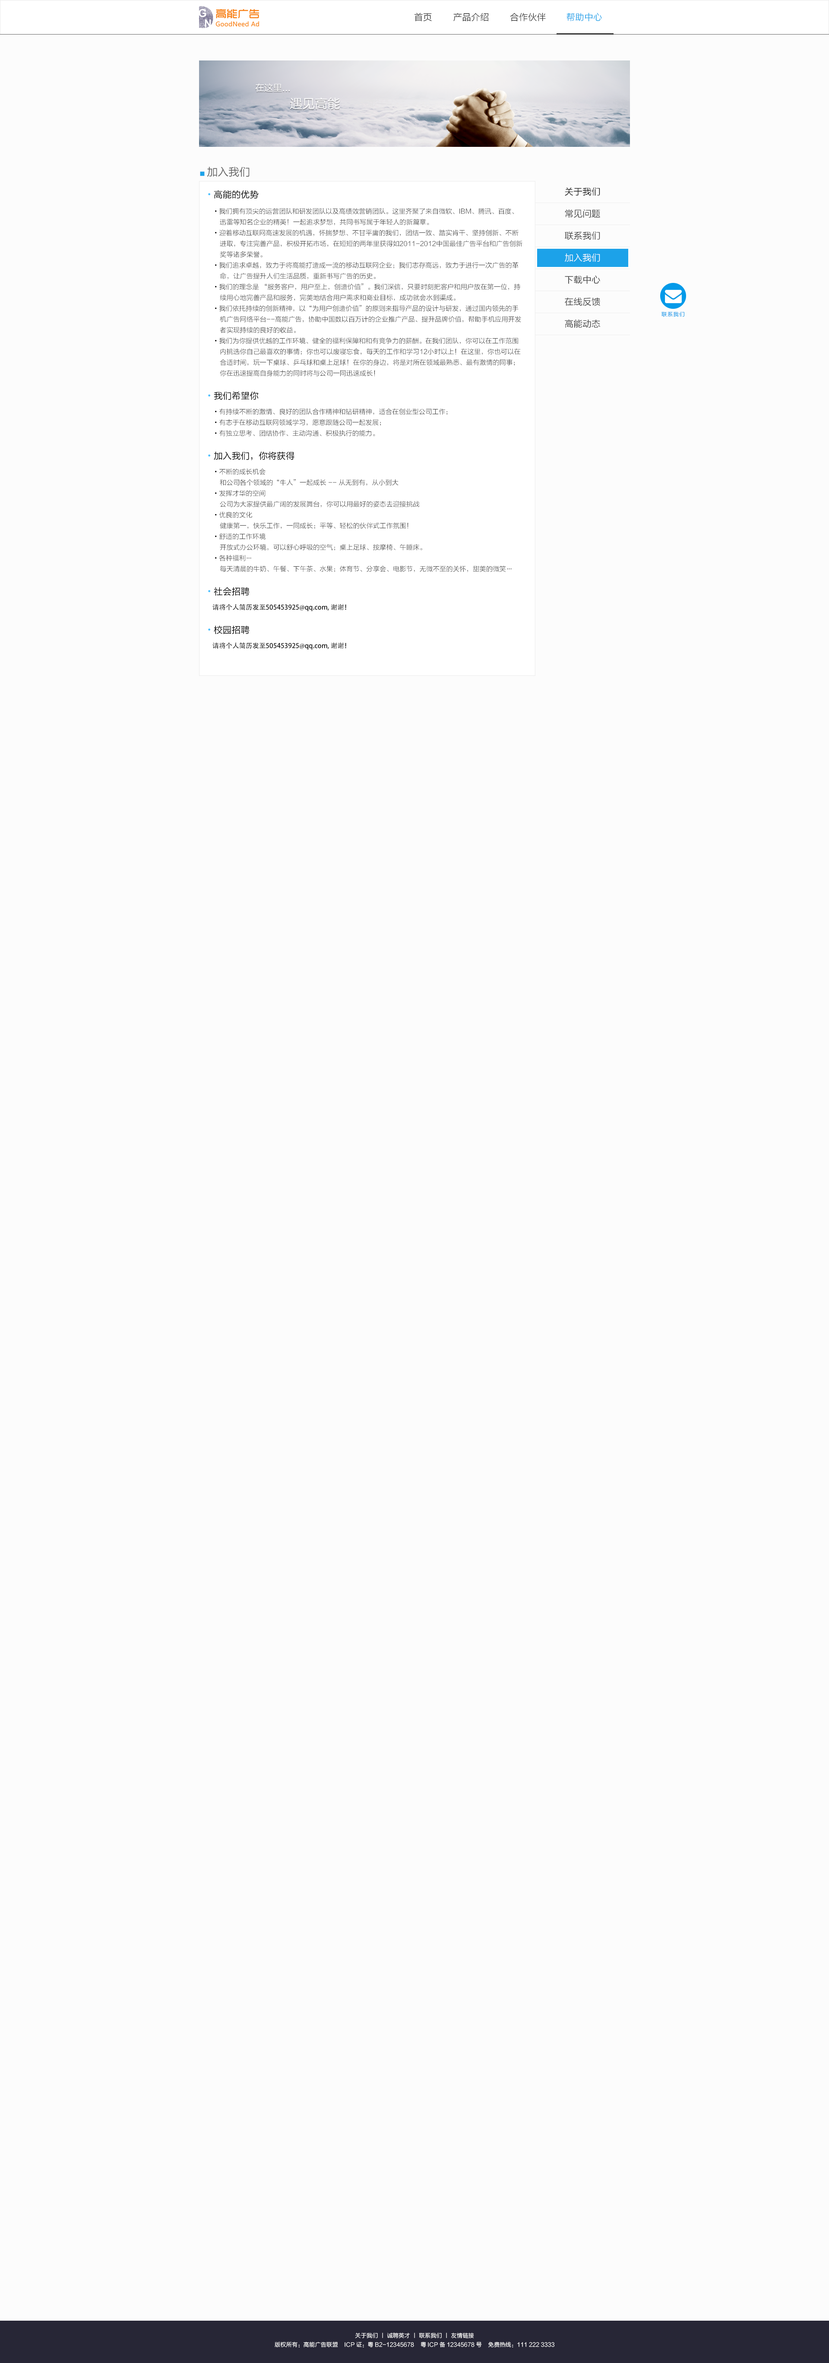
<style>
.page{position:relative;width:829px;height:2363px;background:#fcfcfc}
.page>*{position:absolute;margin:0}
.t1{font:9px "FZLTXHK";color:#333333}
.t2{font:9px "FZLTXHK";color:#1ca2e9}
.t3{font:9px "FZLTHK--GBK1-0";color:#fcfcfc}
.t4{font:12.6px "FZLTHK--GBK1-0";color:#fcfcfc}
.t5{font:10.8px "FZLTHK--GBK1-0";color:#666666}
.t6{font:5.4px "FZLTHK--GBK1-0";color:#1ca2e9}
.t7{font:9px "FZLTHK--GBK1-0";color:#000000}
.t8{font:9px "AdobeHeitiStd-Regular";color:#47c0ff}
.t9{font:9px "FZLTXHK";color:#000000}
.t10{font:6.7px/10.8px "FZLTXHK";color:#333333}
.t11{font:6.7px "AdobeHeitiStd-Regular";color:#000000}
.t12{font:9px "FZLTXHK";color:#ffffff}
.t13{font:5.4px "FZLTXHK";letter-spacing:0.1em;color:#039ae9}
.t14{font:5.8px "FZLTXHK";color:#ffffff}
</style>
<div class="page">
<p class="t1" style="left:414px;top:13px;width:18px;height:9px">首页</p>
<p class="t1" style="left:454px;top:13px;width:35px;height:9px">产品介绍</p>
<p class="t1" style="left:510px;top:13px;width:36px;height:9px">合作伙伴</p>
<p class="t2" style="left:567px;top:13px;width:35px;height:9px">帮助中心</p>
<p class="t3" style="left:255px;top:83px;width:35px;height:9px">在这里...</p>
<p class="t4" style="left:290px;top:97px;width:50px;height:12px">遇见高能</p>
<p class="t5" style="left:200px;top:167px;width:50px;height:10px"><span class="t6">■ </span>加入我们</p>
<p class="t7" style="left:208px;top:190px;width:51px;height:9px"><span class="t8">•</span>高能的优势</p>
<p class="t9" style="left:565px;top:187px;width:35px;height:9px">关于我们</p>
<p class="t10" style="left:215px;top:208px;width:308px;height:168px"><span class="t11">•</span>我们拥有顶尖的运营团队和研发团队以及高绩效营销团队。这里齐聚了来自微软、IBM、腾讯、百度、  <br>    迅雷等知名企业的精英！一起追求梦想，共同书写属于年轻人的新篇章。<br><span class="t11">•</span>迎着移动互联网高速发展的机遇，怀揣梦想、不甘平庸的我们，团结一致、踏实肯干、坚持创新、不断  <br>    进取，专注完善产品，积极开拓市场，在短短的两年里获得如2011-2012中国最佳广告平台和广告创新<br>    奖等诸多荣誉。<br><span class="t11">•</span>我们追求卓越，致力于将高能打造成一流的移动互联网企业；我们志存高远，致力于进行一次广告的革<br>    命，让广告提升人们生活品质，重新书写广告的历史。<br><span class="t11">•</span>我们的理念是 “服务客户，用户至上，创造价值”。我们深信，只要时刻把客户和用户放在第一位，持<br>    续用心地完善产品和服务，完美地结合用户需求和商业目标，成功就会水到渠成。<br><span class="t11">•</span>我们依托持续的创新精神，以“为用户创造价值”的原则来指导产品的设计与研发，通过国内领先的手<br>    机广告网络平台--高能广告，协助中国数以百万计的企业推广产品、提升品牌价值，帮助手机应用开发 <br>    者实现持续的良好的收益。<br><span class="t11">•</span>我们为你提供优越的工作环境、健全的福利保障和和有竞争力的薪酬。在我们团队，你可以在工作范围  <br>    内挑选你自己最喜欢的事情；你也可以废寝忘食，每天的工作和学习12小时以上！在这里，你也可以在 <br>    合适时间，玩一下桌球、乒乓球和桌上足球！在你的身边，将是对所在领域最熟悉、最有激情的同事；<br>    你在迅速提高自身能力的同时将与公司一同迅速成长！</p>
<p class="t1" style="left:565px;top:209px;width:35px;height:9px">常见问题</p>
<p class="t1" style="left:565px;top:232px;width:35px;height:8px">联系我们</p>
<p class="t12" style="left:565px;top:253px;width:35px;height:9px">加入我们</p>
<p class="t1" style="left:565px;top:275px;width:35px;height:9px">下载中心</p>
<p class="t1" style="left:565px;top:298px;width:35px;height:8px">在线反馈</p>
<p class="t13" style="left:662px;top:311px;width:23px;height:6px">联系我们</p>
<p class="t1" style="left:565px;top:319px;width:35px;height:9px">高能动态</p>
<p class="t7" style="left:208px;top:391px;width:51px;height:9px"><span class="t8">•</span>我们希望你</p>
<p class="t10" style="left:215px;top:408px;width:233px;height:28px"><span class="t11">•</span>有持续不断的激情、良好的团队合作精神和钻研精神，适合在创业型公司工作；<br><span class="t11">•</span>有志于在移动互联网领域学习，愿意跟随公司一起发展；<br><span class="t11">•</span>有独立思考、团结协作、主动沟通、积极执行的能力。</p>
<p class="t7" style="left:208px;top:451px;width:87px;height:10px"><span class="t8">•</span>加入我们，你将获得</p>
<p class="t10" style="left:215px;top:468px;width:297px;height:104px"><span class="t11">•</span>不断的成长机会<br>    和公司各个领域的“牛人”一起成长 -- 从无到有，从小到大<br><span class="t11">•</span>发挥才华的空间<br>    公司为大家提供最广阔的发展舞台，你可以用最好的姿态去迎接挑战<br><span class="t11">•</span>优良的文化<br>    健康第一，快乐工作，一同成长；平等、轻松的伙伴式工作氛围！<br><span class="t11">•</span>舒适的工作环境<br>    开放式办公环境，可以舒心呼吸的空气；桌上足球、按摩椅、午睡床。<br><span class="t11">•</span>各种福利…<br>    每天清晨的牛奶、午餐、下午茶、水果；体育节、分享会、电影节，无微不至的关怀，甜美的微笑…</p>
<p class="t7" style="left:208px;top:587px;width:42px;height:9px"><span class="t8">•</span>社会招聘</p>
<p class="t11" style="left:213px;top:604px;width:133px;height:7px">请将个人简历发至505453925@qq.com, 谢谢！</p>
<p class="t7" style="left:208px;top:626px;width:42px;height:8px"><span class="t8">•</span>校园招聘</p>
<p class="t11" style="left:213px;top:642px;width:133px;height:8px">请将个人简历发至505453925@qq.com, 谢谢！</p>
<p class="t14" style="left:355px;top:2333px;width:119px;height:6px">关于我们 丨 诚聘英才 丨 联系我们 丨 友情链接</p>
<p class="t14" style="left:275px;top:2342px;width:280px;height:6px">版权所有：高能广告联盟    ICP证：粤B2-12345678    粤ICP备12345678号    免费热线：111 222 3333</p>
</div>
